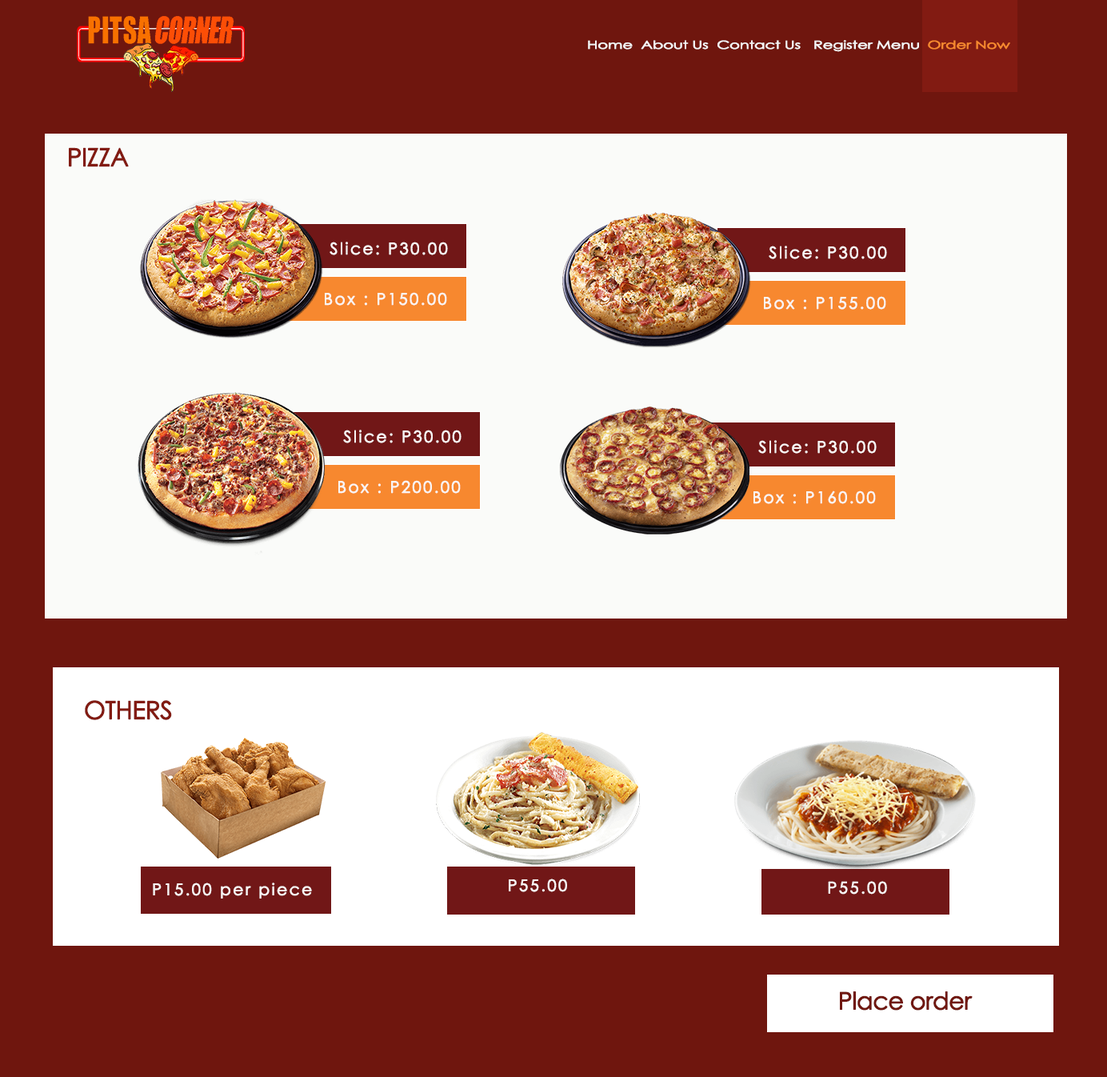
<style>
.page{position:relative;width:1107px;height:1077px;background:#6f160e}
.page>*{position:absolute;margin:0}
.t1{font:11.2px "CenturyGothic";letter-spacing:-0.035em;color:#f5f5f5;font-weight:bold;scale:1.41 1}
.t2{font:11.2px "CenturyGothic";letter-spacing:-0.035em;color:#f7882f;font-weight:bold;scale:1.41 1}
.t3{font:24.8px "CenturyGothic";letter-spacing:-0.035em;color:#821b12;font-weight:bold}
.t4{font:16px "CenturyGothic";letter-spacing:0.1em;color:#f9f5f4;font-weight:bold}
.t5{font:24px "CenturyGothic";letter-spacing:-0.035em;color:#70170f;font-weight:bold}
</style>
<div class="page">
<p class="t1" style="left:588px;top:40px;width:422px;height:12px">Home  About Us  Contact Us   Register Menu  <span class="t2">Order Now</span></p>
<p class="t3" style="left:69px;top:147px;width:60px;height:20px">PIZZA</p>
<p class="t4" style="left:330px;top:242px;width:118px;height:13px">Slice: P30.00</p>
<p class="t4" style="left:769px;top:246px;width:118px;height:13px">Slice: P30.00</p>
<p class="t4" style="left:325px;top:292px;width:122px;height:14px">Box : P150.00</p>
<p class="t4" style="left:764px;top:296px;width:122px;height:14px">Box : P155.00</p>
<p class="t4" style="left:343px;top:430px;width:119px;height:13px">Slice: P30.00</p>
<p class="t4" style="left:758px;top:440px;width:119px;height:14px">Slice: P30.00</p>
<p class="t4" style="left:338px;top:480px;width:123px;height:14px">Box : P200.00</p>
<p class="t4" style="left:754px;top:490px;width:122px;height:14px">Box : P160.00</p>
<p class="t3" style="left:85px;top:700px;width:87px;height:20px">OTHERS</p>
<p class="t4" style="left:509px;top:878px;width:58px;height:14px">P55.00</p>
<p class="t4" style="left:828px;top:881px;width:59px;height:13px">P55.00</p>
<p class="t4" style="left:153px;top:882px;width:159px;height:16px">P15.00 per piece</p>
<p class="t5" style="left:840px;top:991px;width:133px;height:19px">Place order</p>
</div>
